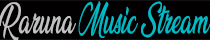
<style>
.page{position:relative;width:210px;height:40px;background:#020000}
.page>*{position:absolute;margin:0}
.t1{font:34.3px "Ananda";color:#00bac6;scale:0.62 1}
.t2{font:34.3px "Ananda";color:#c1c1c1;scale:0.62 1}
</style>
<div class="page">
<p class="t1" style="left:0px;top:1px;width:211px;height:40px"><span class="t2">Raruna </span>Music Stream</p>
</div>
